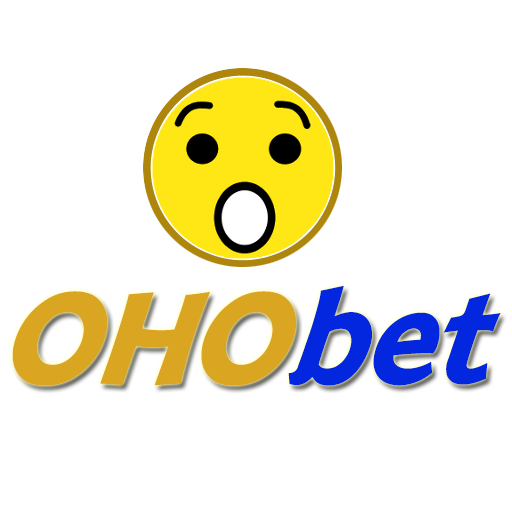
<style>
.page{position:relative;width:512px;height:512px;background:#ffffff}
.page>*{position:absolute;margin:0}
.t1{font:183.5px "DBEttaroX";color:#daa520;font-style:italic;scale:0.96 1}
.t2{font:183.5px "DBEttaroX";color:#0327de;font-style:italic;scale:0.96 1}
</style>
<div class="page">
<p class="t1" style="left:12px;top:285px;width:489px;height:101px">OHO<span class="t2">bet</span></p>
</div>
